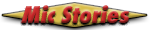
<style>
.page{position:relative;width:150px;height:30px;background:#ffffff}
.page>*{position:absolute;margin:0}
.t1{font:22.3px "Futura-CondensedExtraBold";font-style:italic}
</style>
<div class="page">
<p class="t1" style="left:21px;top:5px;width:109px;height:18px">Mic Stories</p>
</div>
